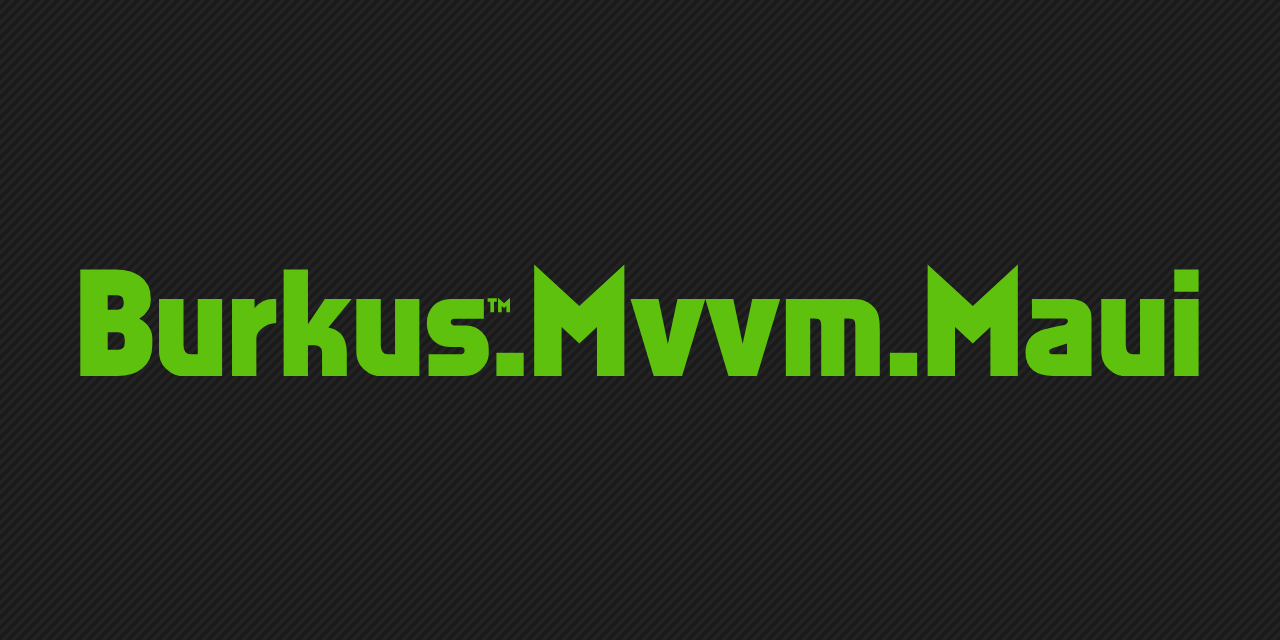
<style>
.page{position:relative;width:1280px;height:640px;background:#1a1a1a}
.page>*{position:absolute;margin:0}
.t1{font:139.8px "Faktos";color:#5ec10e}
.t2{font:30px "Faktos";color:#5ec10e}
</style>
<div class="page">
<p class="t1" style="left:80px;top:264px;width:1119px;height:112px">Burkus.Mvvm.Maui</p>
<p class="t2" style="left:487px;top:297px;width:24px;height:16px">™</p>
</div>
